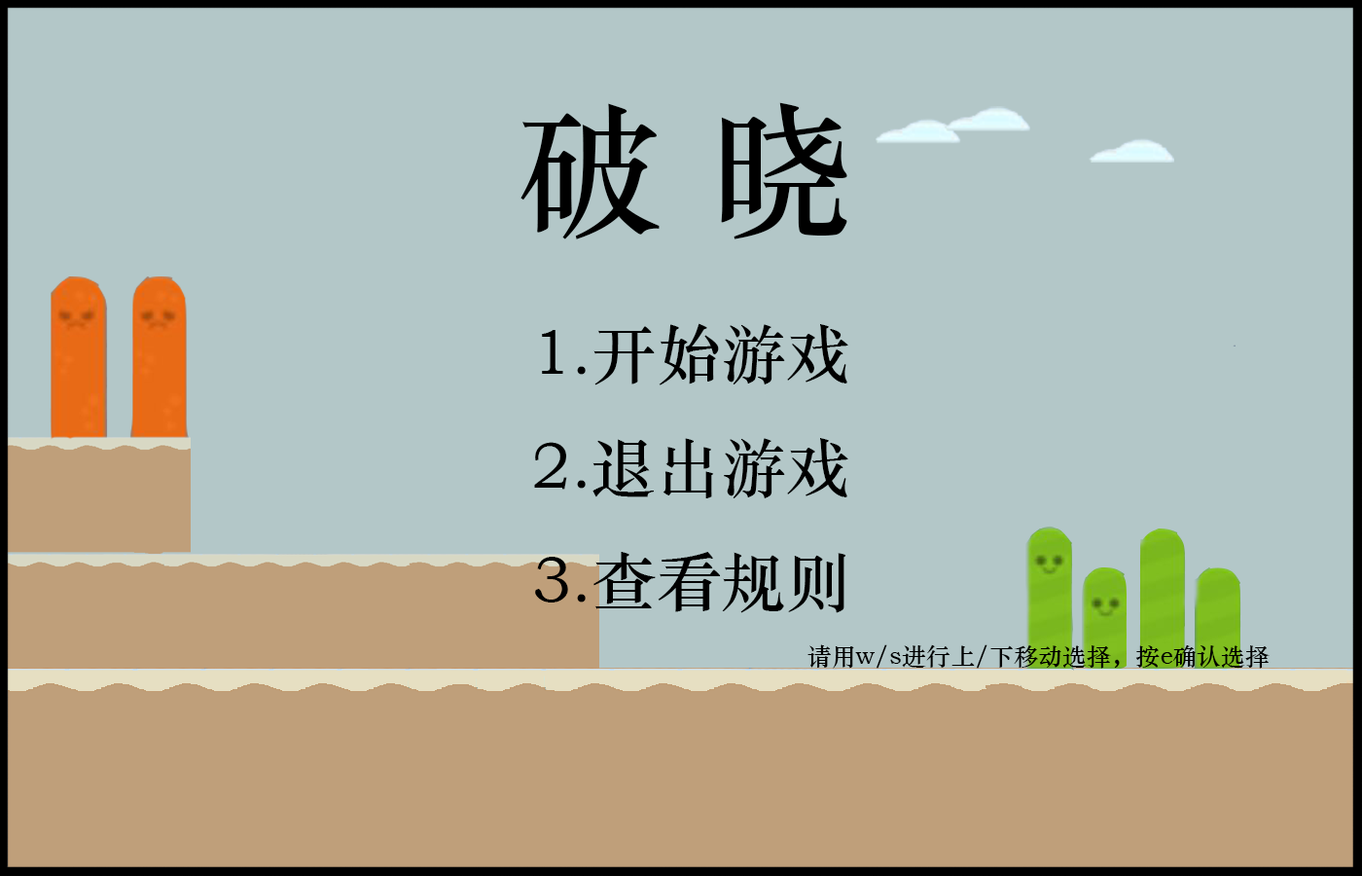
<style>
.page{position:relative;width:1362px;height:876px;background:#b3c7c8}
.page>*{position:absolute;margin:0}
.t1{font:145.9px "STZhongsong";color:#000000}
.t2{font:64.9px "STZhongsong";color:#000000}
.t3{font:24.3px "STZhongsong";color:#000000}
</style>
<div class="page">
<p class="t1" style="left:520px;top:102px;width:327px;height:137px">破 晓</p>
<p class="t2" style="left:534px;top:323px;width:314px;height:290px">1.开始游戏<br>2.退出游戏<br>3.查看规则</p>
<p class="t3" style="left:807px;top:644px;width:463px;height:24px">请用w/s进行上/下移动选择，按e确认选择</p>
</div>
